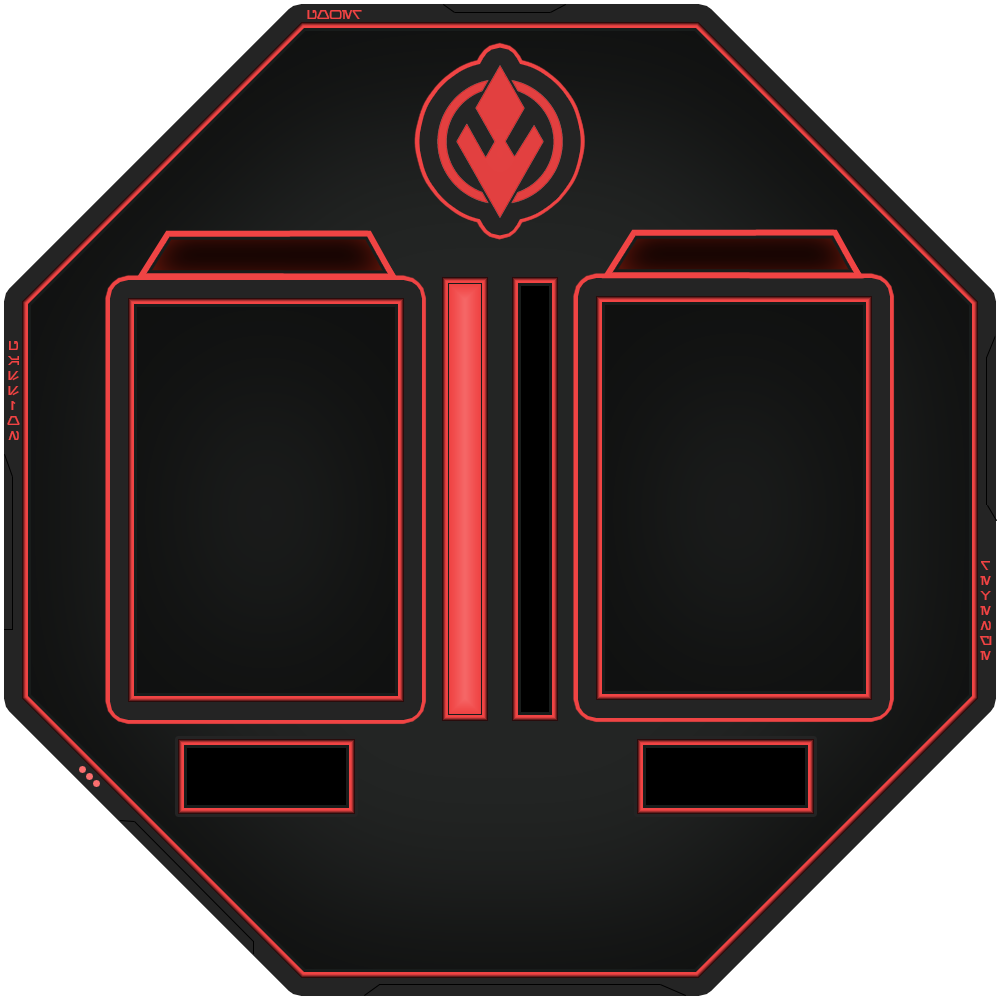
<style>
.page{position:relative;width:1000px;height:1000px}
.page>*{position:absolute;margin:0}
.t1{font:12.5px "Aurebesh-Bold";color:#f04444}
</style>
<div class="page">
<p class="t1" style="left:307px;top:10px;width:55px;height:9px">POWER</p>
<p class="t1" style="left:7px;top:341px;width:13px;height:99px;text-align:center">P<br>A<br>S<br>S<br>I<br>O<br>N</p>
<p class="t1" style="left:979px;top:561px;width:13px;height:99px;text-align:center">R<br>E<br>V<br>E<br>N<br>G<br>E</p>
</div>
